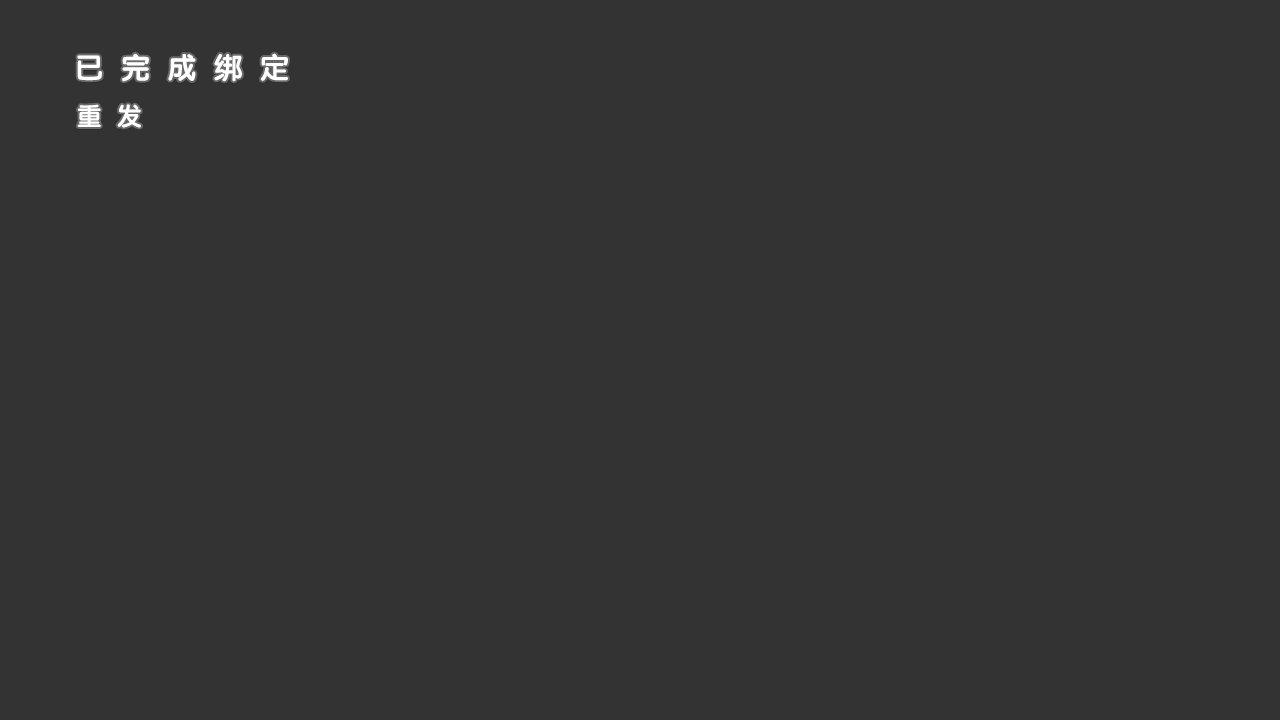
<style>
.page{position:relative;width:1280px;height:720px;background:#333333}
.page>*{position:absolute;margin:0}
.t1{font:28px "STYuanti-SC-Bold";letter-spacing:0.2em;color:#ffffff}
.t2{font:24px "STYuanti-SC-Bold";letter-spacing:0.2em;color:#ffffff}
</style>
<div class="page">
<p class="t1" style="left:77px;top:53px;width:211px;height:29px">已 完 成 绑 定</p>
<p class="t2" style="left:77px;top:104px;width:64px;height:24px">重 发</p>
</div>
